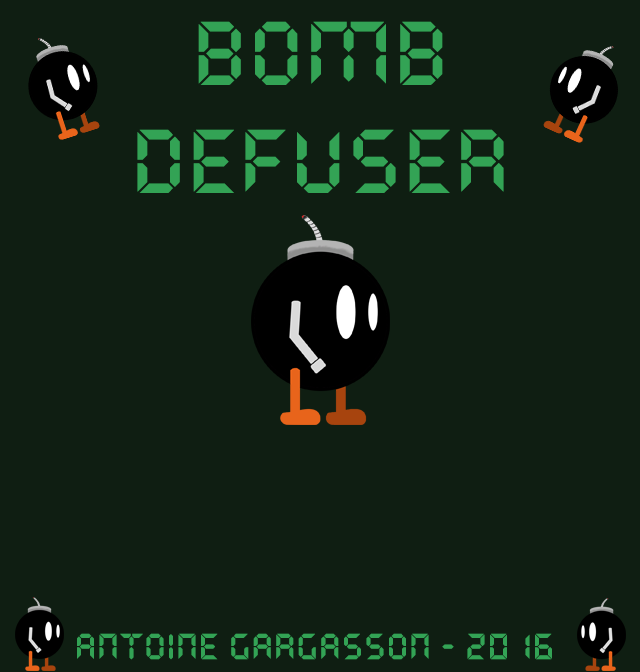
<style>
.page{position:relative;width:640px;height:672px;background:#0f1e12}
.page>*{position:absolute;margin:0}
.t1{font:90px "QuartzMS";color:#33a355}
.t2{font:36px "QuartzMS";color:#33a355}
</style>
<div class="page">
<p class="t1" style="left:137px;top:21px;width:367px;height:172px;text-align:center">BOMB<br>DEFUSER</p>
<p class="t2" style="left:77px;top:633px;width:475px;height:27px">Antoine Gargasson - 2016</p>
</div>
